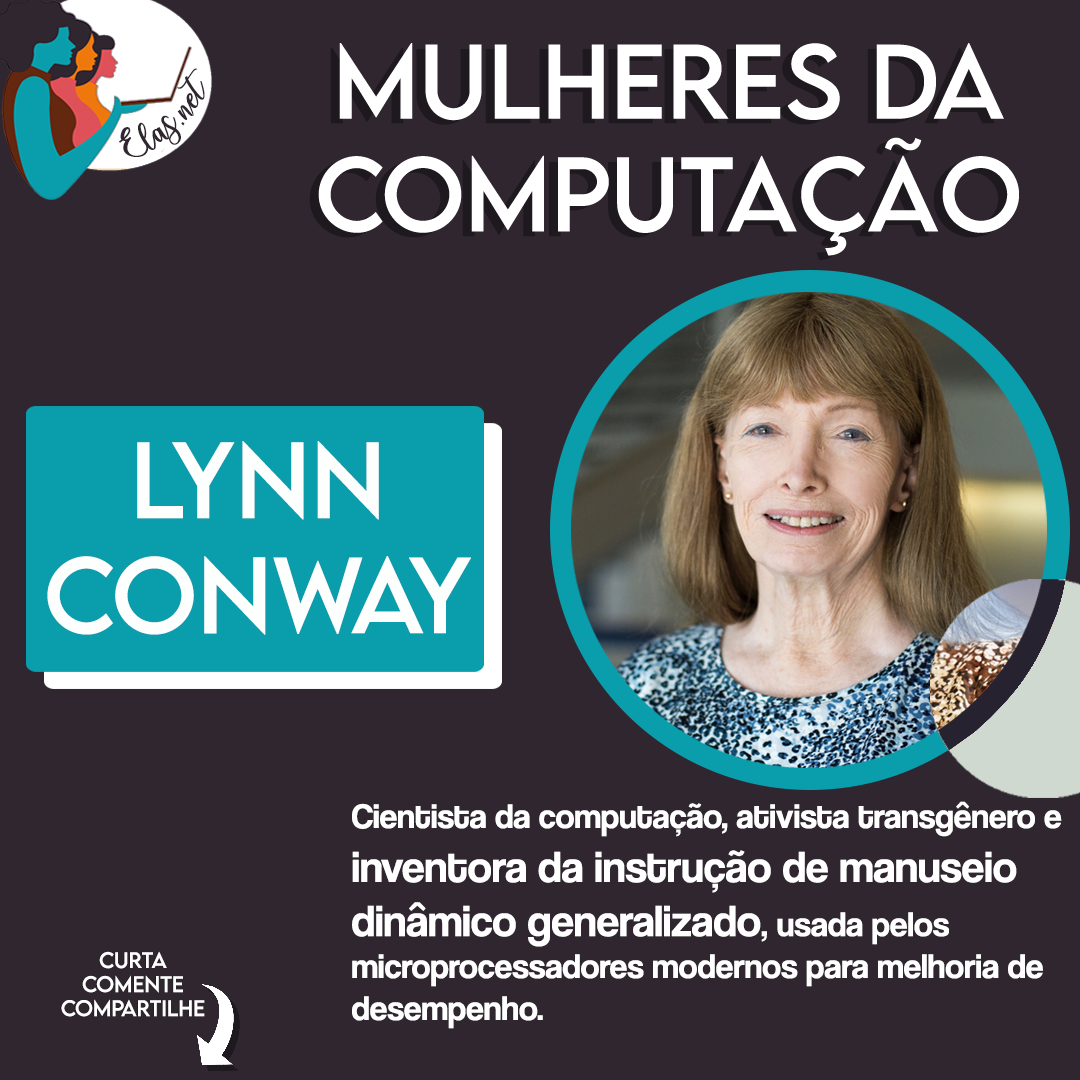
<style>
.page{position:relative;width:1080px;height:1080px;background:#2f262f}
.page>*{position:absolute;margin:0}
.t1{font:25px "charlinda-Regular";color:#2f262f;scale:1.18 1}
.t2{font:96px "LEMONMILK-Regular";color:#ffffff}
.t3{font:35px "CoolveticaRg-Regular";color:#ffffff}
.t4{font:45px "CoolveticaRg-Regular";color:#ffffff}
.t5{font:20px "LEMONMILK-Regular"}
.t6{font:20px "LEMONMILK-Regular";color:#ffffff}
</style>
<div class="page">
<p class="t1" style="left:119px;top:68px;width:86px;height:89px;rotate:-43deg">Elas.net</p>
<p class="t2" style="left:47px;top:441px;width:424px;height:194px;text-align:center">Lynn<br>Conway</p>
<p class="t3" style="left:352px;top:801px;width:710px;height:228px">Cientista da computação, ativista transgênero e <br><span class="t4">inventora da instrução de manuseio <br>dinâmico generalizado</span>, usada pelos <br>microprocessadores modernos para melhoria de <br>desempenho.</p>
<p class="t5" style="left:60px;top:951px;width:144px;height:66px;text-align:center">Curta<br>Comente<br>Compartilhe</p>
<p class="t6" style="left:61px;top:951px;width:144px;height:66px;text-align:center">Curta<br>Comente<br>Compartilhe</p>
</div>
